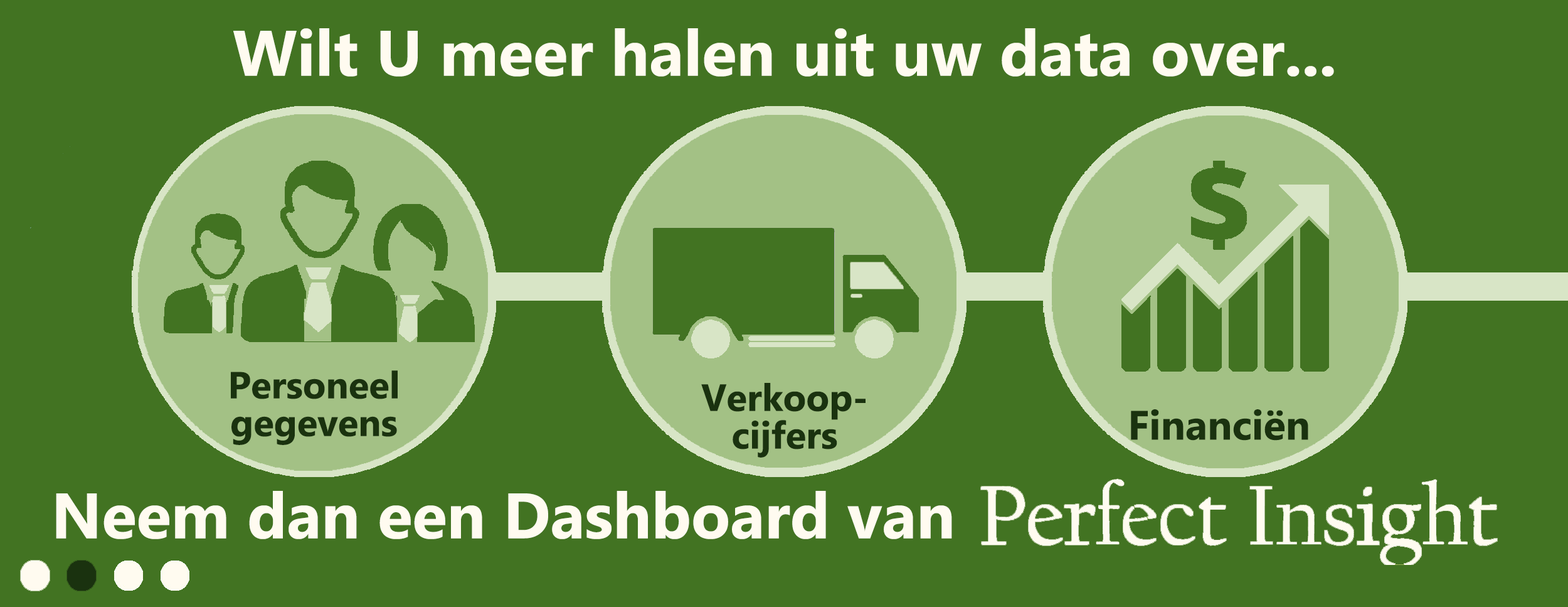
<style>
.page{position:relative;width:1568px;height:607px;background:#427322}
.page>*{position:absolute;margin:0}
.t1{font:64px "MicrosoftPhagsPa-Bold";color:#fffbf0}
.t2{font:37.6px/37.6px "MicrosoftPhagsPa-Bold";color:#1a320f}
.t3{font:37.8px/37.6px "MicrosoftPhagsPa-Bold";color:#1a320f}
.t4{font:40.9px "MicrosoftPhagsPa-Bold";color:#1a320f}
</style>
<div class="page">
<p class="t1" style="left:233px;top:28px;width:1101px;height:49px">Wilt U meer halen uit uw data over...</p>
<p class="t2" style="left:231px;top:370px;width:167px;height:75px;text-align:center">Personeel<br>gegevens</p>
<p class="t3" style="left:701px;top:383px;width:165px;height:74px;text-align:center">Verkoop-<br>cijfers</p>
<p class="t4" style="left:1131px;top:409px;width:177px;height:31px">Financiën</p>
<p class="t1" style="left:56px;top:490px;width:896px;height:49px">Neem dan een Dashboard van</p>
</div>
